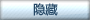
<style>
.page{position:relative;width:90px;height:20px}
.page>*{position:absolute;margin:0}
.t1{font:12.4px "MicrosoftYaHei";color:#244765;text-transform:uppercase}
</style>
<div class="page">
<p class="t1" style="left:33px;top:3px;width:25px;height:13px">隐藏</p>
</div>
